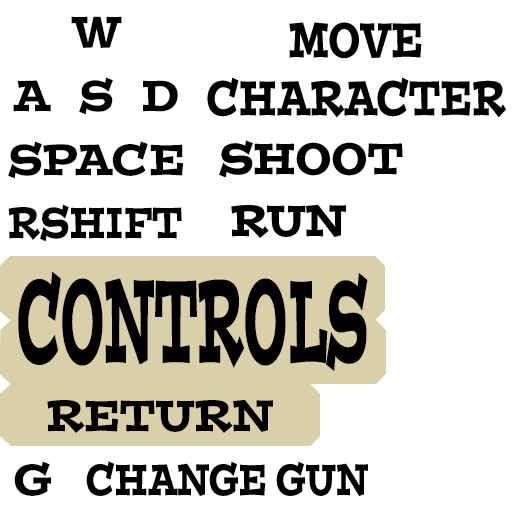
<style>
.page{position:relative;width:512px;height:512px;background:#ffffff}
.page>*{position:absolute;margin:0}
.t1{font:43.6px "PostinoStd";color:#000000;scale:0.83 1}
.t2{font:48.3px "PostinoStd";color:#000000;scale:0.67 1}
.t3{font:43.6px "PostinoStd";color:#000000;scale:0.71 1}
.t4{font:116.2px "PostinoStd";color:#000000;scale:0.38 1}
.t5{font:43.6px "PostinoStd";color:#000000;scale:0.65 1}
</style>
<div class="page">
<p class="t1" style="left:71px;top:16px;width:51px;height:32px">W</p>
<p class="t2" style="left:207px;top:22px;width:300px;height:96px;text-align:center">MOVE<br>CHARACTER</p>
<p class="t1" style="left:79px;top:77px;width:34px;height:38px">S</p>
<p class="t1" style="left:13px;top:80px;width:38px;height:32px">A</p>
<p class="t1" style="left:143px;top:80px;width:35px;height:32px">D</p>
<p class="t1" style="left:8px;top:141px;width:176px;height:38px">SPACE</p>
<p class="t1" style="left:219px;top:140px;width:184px;height:38px">SHOOT</p>
<p class="t3" style="left:8px;top:204px;width:174px;height:38px">RSHIFT</p>
<p class="t1" style="left:231px;top:204px;width:115px;height:34px">RUN</p>
<p class="t4" style="left:18px;top:271px;width:350px;height:100px">CONTROLS</p>
<p class="t1" style="left:47px;top:399px;width:226px;height:34px">RETURN</p>
<p class="t1" style="left:14px;top:461px;width:37px;height:35px">G</p>
<p class="t5" style="left:86px;top:461px;width:282px;height:35px">CHANGE GUN</p>
</div>
